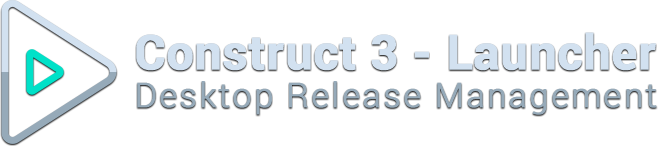
<style>
.page{position:relative;width:658px;height:146px;background:#ffffff}
.page>*{position:absolute;margin:0}
.t1{font:34px/38px "Roboto-Light";letter-spacing:0.05em;color:#96aab9;font-weight:bold}
.t2{font:48px/38px "Roboto-Bold";color:#d2e1f0;font-weight:bold}
</style>
<div class="page">
<p class="t1" style="left:136px;top:32px;width:521px;height:83px"><span class="t2">Construct 3 - Launcher<br> </span>Desktop Release Management</p>
</div>
